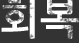
<style>
.page{position:relative;width:79px;height:43px;background:#333333}
.page>*{position:absolute;margin:0}
.t1{font:10.1px "NanumGothicBold"}
</style>
<div class="page">
<p class="t1" style="left:1px;top:0px;width:78px;height:39px;text-align:center">회복</p>
</div>
